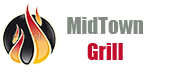
<style>
.page{position:relative;width:169px;height:75px;background:#ffffff}
.page>*{position:absolute;margin:0}
.t1{font:21px "Impact";color:#828b81}
.t2{font:21px "Impact";color:#c10d2b}
</style>
<div class="page">
<p class="t1" style="left:67px;top:17px;width:76px;height:43px;text-align:center">MidTown<br><span class="t2">Grill</span></p>
</div>
